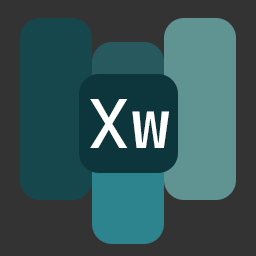
<style>
.page{position:relative;width:256px;height:256px;background:#333333}
.page>*{position:absolute;margin:0}
.t1{font:70.8px "CascadiaCode-Regular";color:#ffffff}
</style>
<div class="page">
<p class="t1" style="left:90px;top:99px;width:79px;height:49px">Xw</p>
</div>
